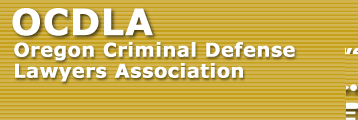
<style>
.page{position:relative;width:358px;height:120px;background:#d2b54d}
.page>*{position:absolute;margin:0}
.t1{font:19px/21.1px "Verdana-Bold";letter-spacing:0.01em;color:#ffffff;font-weight:bold}
</style>
<div class="page">
<p class="t1" style="left:14px;top:42px;width:281px;height:40px">Oregon Criminal Defense <br>Lawyers Association</p>
</div>
